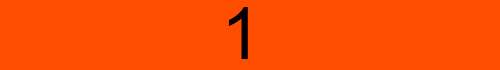
<style>
.page{position:relative;width:500px;height:70px;background:#ff4d00}
.page>*{position:absolute;margin:0}
.t1{font:72px "ArialMT";color:#000000}
</style>
<div class="page">
<p class="t1" style="left:228px;top:7px;width:20px;height:52px">1</p>
</div>
